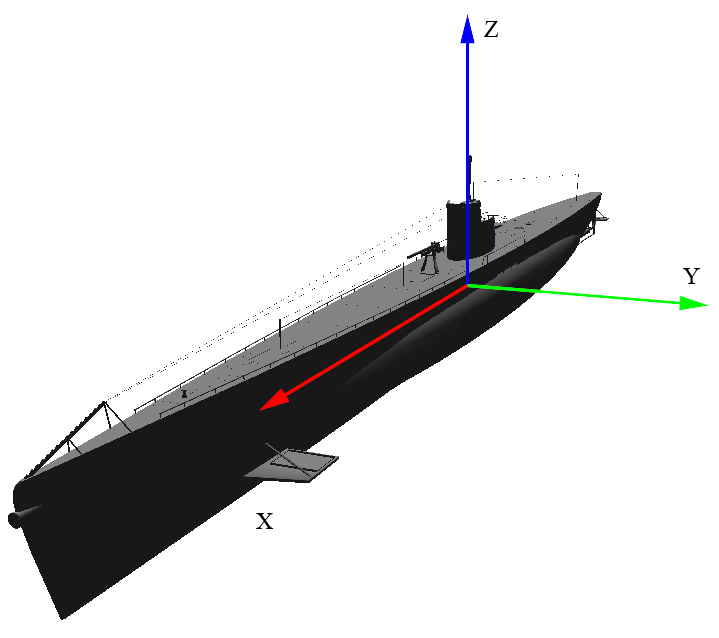
<style>
.page{position:relative;width:719px;height:638px;background:#ffffff}
.page>*{position:absolute;margin:0}
.t1{font:24px "TimesNewRomanPSMT";color:#000000}
</style>
<div class="page">
<p class="t1" style="left:484px;top:21px;width:14px;height:16px">Z</p>
<p class="t1" style="left:683px;top:268px;width:18px;height:16px">Y</p>
<p class="t1" style="left:256px;top:513px;width:18px;height:16px">X</p>
</div>
